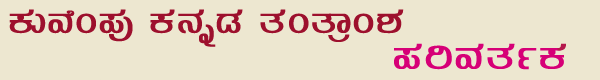
<style>
.page{position:relative;width:600px;height:80px;background:#ede7d0}
.page>*{position:absolute;margin:0}
.t1{font:48px "Kuvempu_Eng_0005";color:#9d102d}
.t2{font:52px "Kuvempu_Eng_0005";color:#d60077}
.t3{font:52px "Kuvempu_Eng_0005";color:#b5194c}
</style>
<div class="page">
<p class="t1" style="left:9px;top:9px;width:395px;height:38px">PÀÄªÉA¥ÀÅ PÀ£ÀßqÀ vÀAvÁæA±À</p>
<p class="t2" style="left:394px;top:43px;width:172px;height:27px">¥ÀjªÀvÀðP<span class="t3">À</span></p>
</div>
